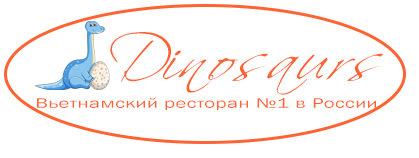
<style>
.page{position:relative;width:419px;height:158px;background:#ffffff}
.page>*{position:absolute;margin:0}
.t1{font:61.2px "VNIA6BoldOblique";letter-spacing:0.04em;color:#fe6433;font-style:italic;scale:1.04 1}
.t2{font:14.3px "FranklinGothic-Book";letter-spacing:0.02em;color:#fe6433;scale:1.45 1}
</style>
<div class="page">
<p class="t1" style="left:110px;top:32px;width:273px;height:63px">Dinosaurs</p>
<p class="t2" style="left:37px;top:97px;width:339px;height:13px">Вьетнамский ресторан №1 в России</p>
</div>
